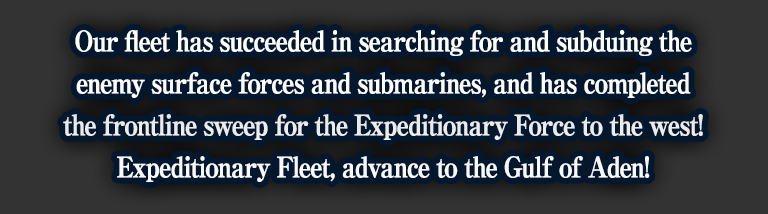
<style>
.page{position:relative;width:768px;height:214px;background:#03172f}
.page>*{position:absolute;margin:0}
.t1{font:28px/42px "RyuminPro-ExBold";letter-spacing:-0.08em;color:#ffffff;font-weight:bold;scale:0.9 1}
</style>
<div class="page">
<p class="t1" style="left:63px;top:30px;width:640px;height:152px;text-align:center">Our fleet has succeeded in searching for and subduing the<br>enemy surface forces and submarines, and has completed<br>the frontline sweep for the Expeditionary Force to the west!<br>Expeditionary Fleet, advance to the Gulf of Aden!</p>
</div>
